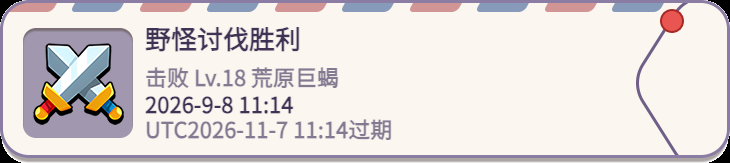
<style>
.page{position:relative;width:730px;height:163px;background:#fbf7f0}
.page>*{position:absolute;margin:0}
.t1{font:26px "WebPSD-18463539-0-Regular";color:#3f3254;font-weight:bold}
.t2{font:22px "WebPSD-18463539-0-Regular";color:#837a91;font-weight:bold}
.t3{font:22px "WebPSD-18463539-0-Regular";color:#3f3254;font-weight:bold}
</style>
<div class="page">
<p class="t1" style="left:145px;top:26px;width:480px;height:36px">野怪讨伐胜利</p>
<p class="t2" style="left:145px;top:67px;width:480px;height:28px">击败 Lv.18 荒原巨蝎</p>
<p class="t3" style="left:145px;top:94px;width:480px;height:28px">2026-9-8 11:14</p>
<p class="t2" style="left:145px;top:119px;width:480px;height:28px">UTC2026-11-7 11:14过期</p>
</div>
